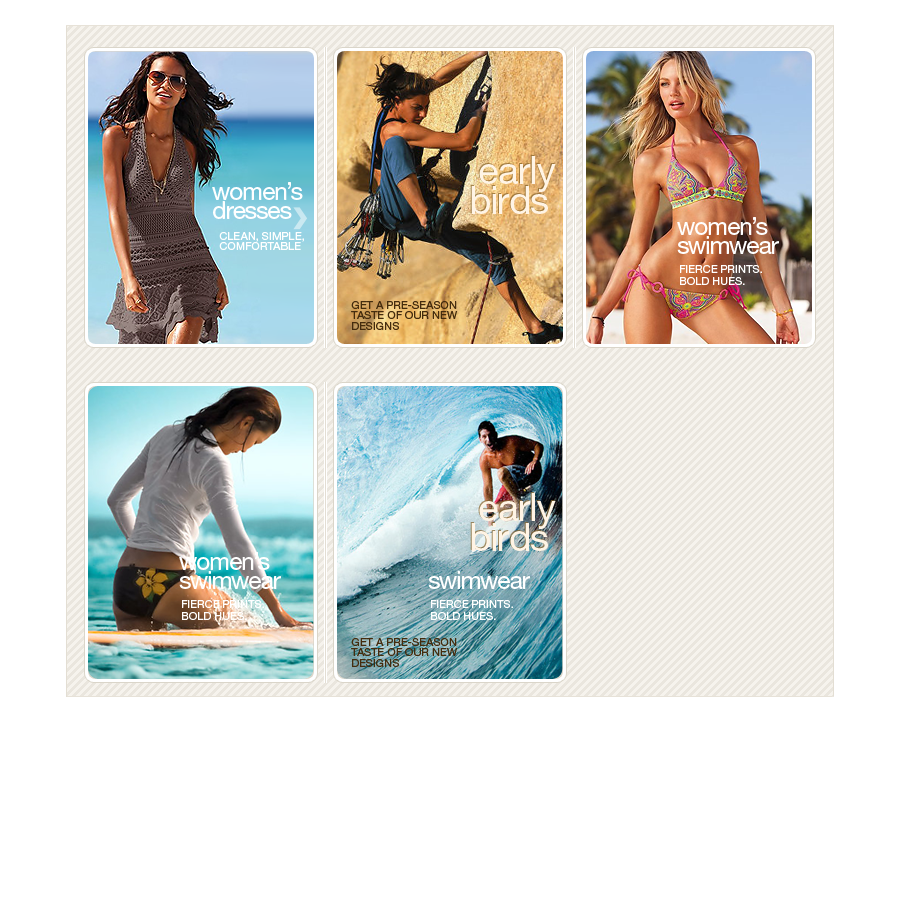
<style>
.page{position:relative;width:900px;height:900px;background:#ffffff}
.page>*{position:absolute;margin:0}
.t1{font:38px/30.9px "HelveticaNeueLTStd-Roman";letter-spacing:-0.02em}
.t2{font:38px/30.9px "HelveticaNeueLTStd-Roman";letter-spacing:-0.02em;color:#fff4e5}
.t3{font:24.7px/19px "HelveticaNeueLTStd-Roman";letter-spacing:-0.04em;color:#ffffff}
.t4{font:11px/10.6px "HelveticaNeueLTStd-Roman";color:#ffffff;text-transform:uppercase}
.t5{font:11px/12px "HelveticaNeueLTStd-Roman";color:#ffffff;text-transform:uppercase}
.t6{font:11px/10.6px "HelveticaNeueLTStd-Roman";color:#442c0e;text-transform:uppercase}
</style>
<div class="page">
<p class="t1" style="left:470px;top:155px;width:85px;height:58px">early<br>birds</p>
<p class="t2" style="left:471px;top:156px;width:85px;height:58px">early<br>birds</p>
<p class="t3" style="left:212px;top:182px;width:91px;height:37px">women’s<br>dresses</p>
<p class="t3" style="left:677px;top:217px;width:102px;height:37px">women’s<br>swimwear</p>
<p class="t4" style="left:219px;top:232px;width:85px;height:18px">clean, simple,<br>comfortable</p>
<p class="t5" style="left:680px;top:265px;width:82px;height:20px">Fierce prints. <br>bold hues.</p>
<p class="t6" style="left:351px;top:301px;width:107px;height:29px">get a pre-season<br>taste of our new<br>designs</p>
<p class="t1" style="left:470px;top:492px;width:85px;height:58px">early<br>birds</p>
<p class="t2" style="left:471px;top:493px;width:85px;height:58px">early<br>birds</p>
<p class="t3" style="left:179px;top:552px;width:102px;height:37px">women’s<br>swimwear</p>
<p class="t5" style="left:182px;top:600px;width:82px;height:20px">Fierce prints. <br>bold hues.</p>
<p class="t6" style="left:351px;top:638px;width:107px;height:29px">get a pre-season<br>taste of our new<br>designs</p>
</div>
